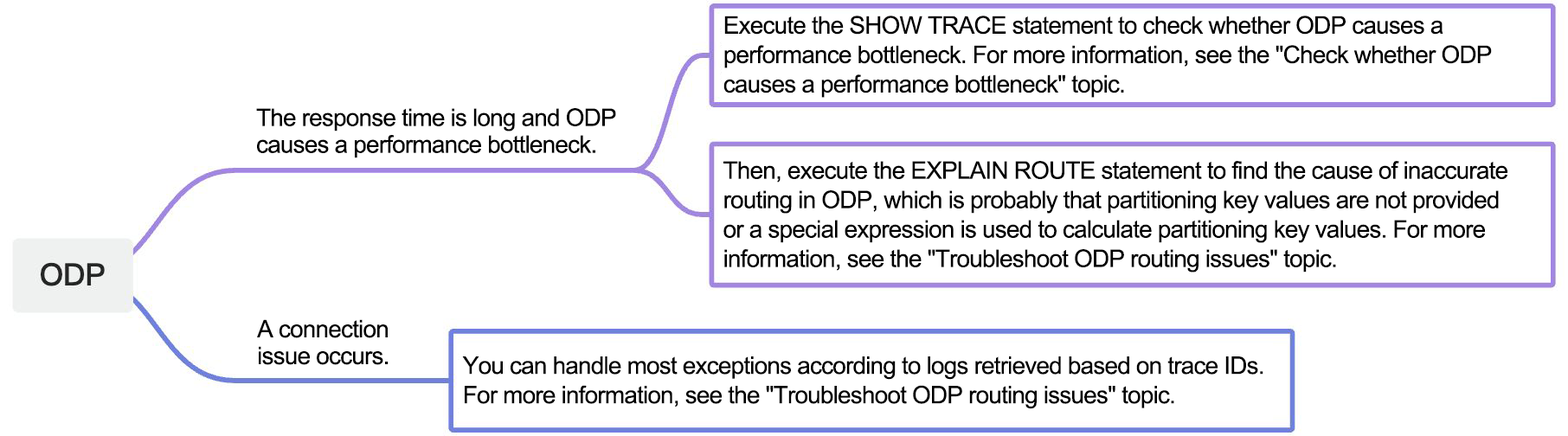
<style>
.page{position:relative;width:1568px;height:436px;background:#ffffff}
.page>*{position:absolute;margin:0}
.t1{font:24.2px/29.4px "ArialMT";letter-spacing:-0.03em;color:#000000}
.t2{font:24.2px/26.8px "ArialMT";letter-spacing:-0.03em;color:#000000}
</style>
<div class="page">
<p class="t1" style="left:723px;top:16px;width:769px;height:82px">Execute the SHOW TRACE statement to check whether ODP causes a performance bottleneck. For more information, see the "Check whether ODP causes a performance bottleneck" topic.</p>
<p class="t2" style="left:256px;top:108px;width:360px;height:50px">The response time is long and ODP causes a performance bottleneck.</p>
<p class="t1" style="left:723px;top:161px;width:784px;height:112px">Then, execute the EXPLAIN ROUTE statement to find the cause of inaccurate routing in ODP, which is probably that partitioning key values are not provided or a special expression is used to calculate partitioning key values. For more information, see the "Troubleshoot ODP routing issues" topic.</p>
<p class="t2" style="left:257px;top:319px;width:132px;height:46px">A connection issue occurs.</p>
<p class="t1" style="left:462px;top:357px;width:801px;height:52px">You can handle most exceptions according to logs retrieved based on trace IDs. For more information, see the "Troubleshoot ODP routing issues" topic.</p>
</div>
